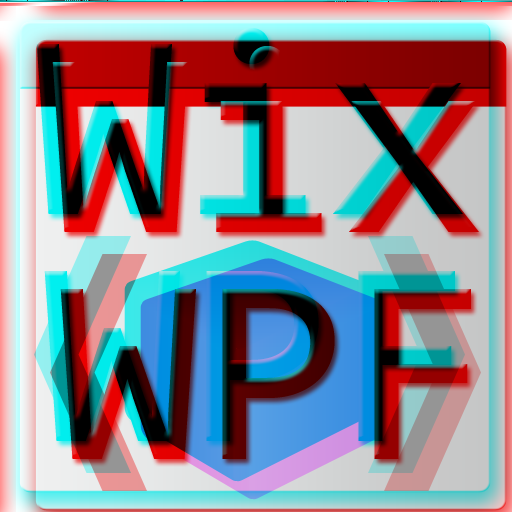
<style>
.page{position:relative;width:512px;height:512px}
.page>*{position:absolute;margin:0}
.t1{font:266.7px "Consolas"}
</style>
<div class="page">
<p class="t1" style="left:36px;top:26px;width:427px;height:186px">Wix</p>
<p class="t1" style="left:44px;top:269px;width:411px;height:170px">WPF</p>
</div>
